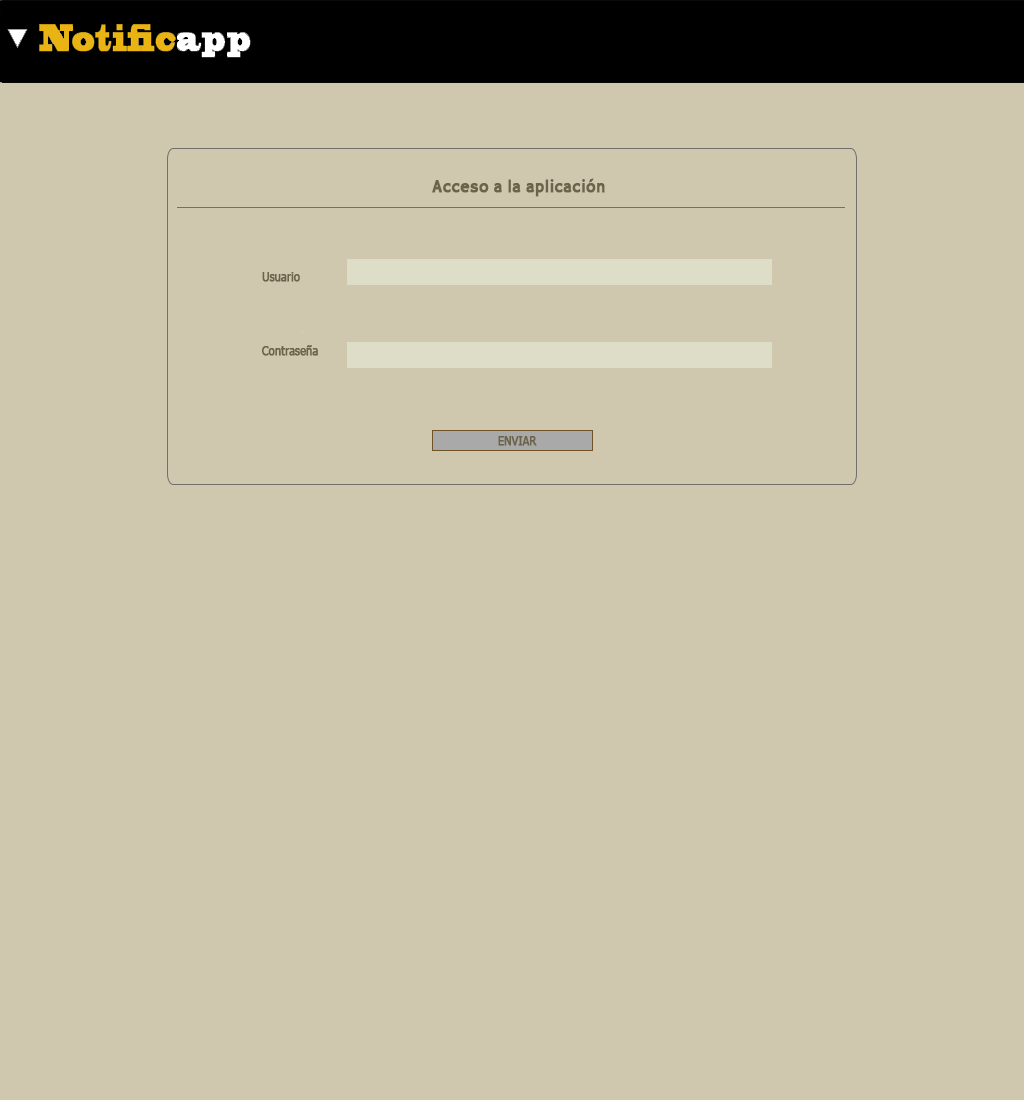
<style>
.page{position:relative;width:1024px;height:1100px;background:#cfc8af}
.page>*{position:absolute;margin:0}
.t1{font:18px "HammersmithOne";color:#6c644a;font-weight:bold;scale:0.9 1}
.t2{font:12px "Tahoma";color:#6c644a;font-weight:bold;scale:0.9 1}
</style>
<div class="page">
<p class="t1" style="left:432px;top:178px;width:173px;height:19px">Acceso a la aplicación</p>
<p class="t2" style="left:262px;top:272px;width:38px;height:10px">Usuario</p>
<p class="t2" style="left:262px;top:345px;width:56px;height:11px">Contraseña</p>
<p class="t2" style="left:498px;top:436px;width:39px;height:10px">ENVIAR</p>
</div>
